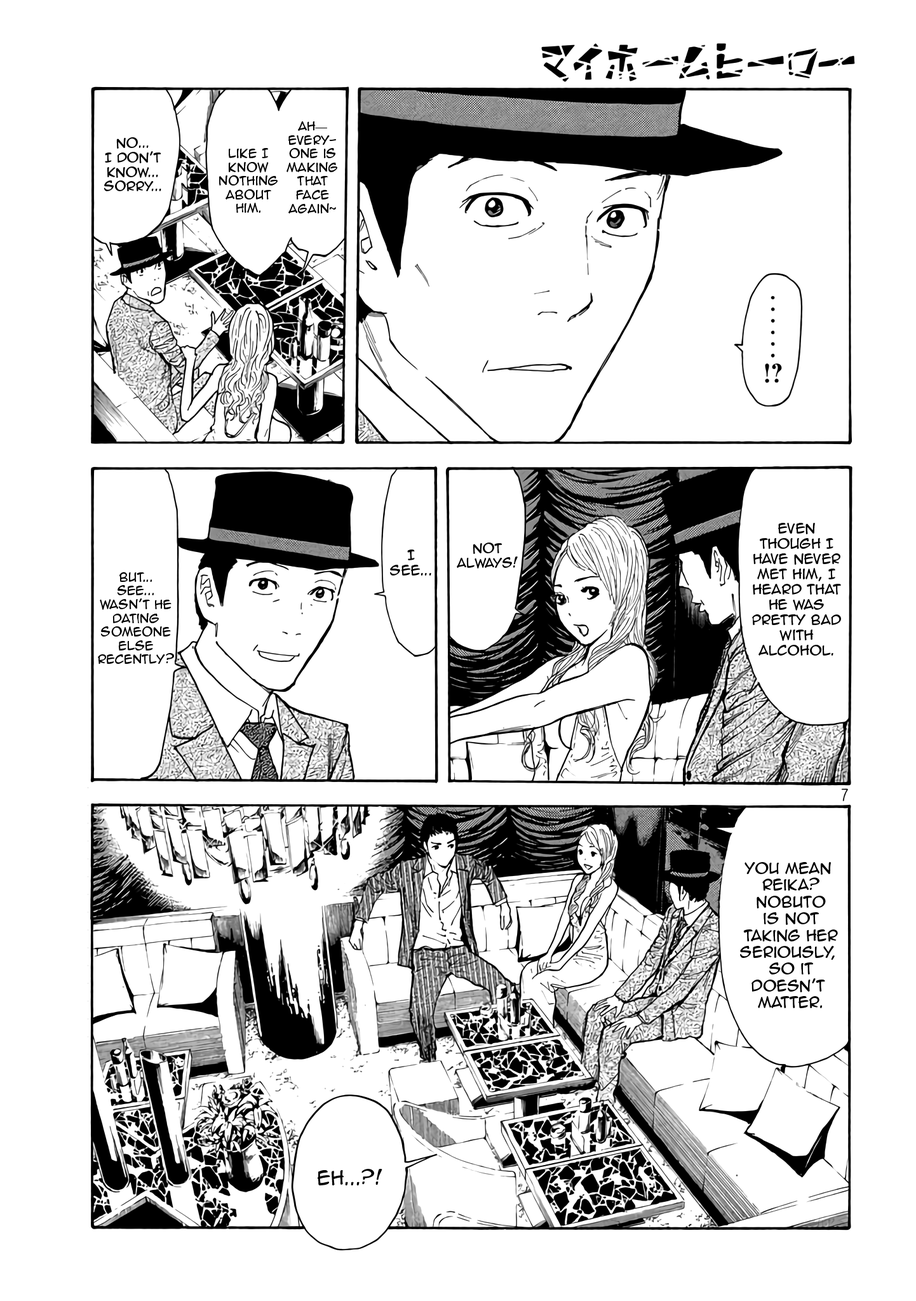
<style>
.page{position:relative;width:916px;height:1301px;background:#ffffff}
.page>*{position:absolute;margin:0}
.t1{font:11.4px "AnimeAce2.0BB";color:#000000}
.t2{font:11.4px "TimesNewRomanPSMT";color:#000000}
.t3{font:12.1px "AnimeAce2.0BB";color:#000000}
.t4{font:12.7px "AnimeAce2.0BB";color:#000000}
.t5{font:14px "AnimeAce2.0BB";color:#000000}
.t6{font:17.8px "AnimeAce2.0BB";color:#000000}
</style>
<div class="page">
<p class="t1" style="left:287px;top:121px;width:50px;height:93px;text-align:center">Ah<span class="t2">—</span><br>Every-<br>one is<br>making<br>that<br>face<br>again~</p>
<p class="t3" style="left:104px;top:137px;width:57px;height:54px;text-align:center">No...<br>I don’t<br>know...<br>Sorry...</p>
<p class="t1" style="left:219px;top:148px;width:59px;height:65px;text-align:center">Like I<br>Know<br>Nothing<br>About<br>Him.</p>
<p class="t4" style="left:752px;top:523px;width:89px;height:133px;text-align:center">Even though I Have never MEt Him, I heard that he was <br>pretty bad with <br>alcohol.</p>
<p class="t3" style="left:457px;top:543px;width:61px;height:26px;text-align:center">Not<br>always!</p>
<p class="t4" style="left:390px;top:550px;width:41px;height:26px;text-align:center">I<br>see...</p>
<p class="t1" style="left:98px;top:572px;width:76px;height:92px;text-align:center">BUt...<br>see...<br>wasn’t he<br>dating<br>Someone<br>else<br>Recently?</p>
<p class="t5" style="left:740px;top:862px;width:98px;height:146px;text-align:center">YOu mean <br>Reika?<br>Nobuto<br>is not<br>taking her<br>seriously, <br>so it<br>doesn’t <br>Matter.</p>
<p class="t6" style="left:318px;top:1169px;width:65px;height:17px">EH...?!</p>
</div>
